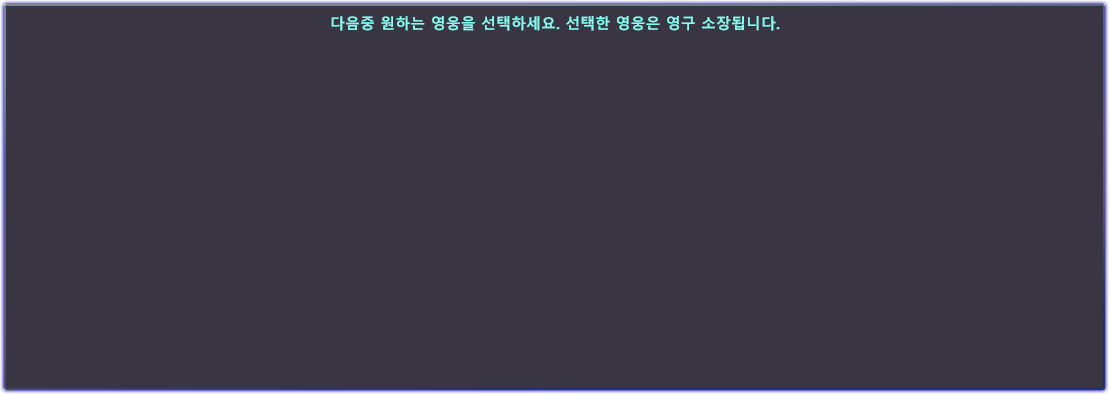
<style>
.page{position:relative;width:1110px;height:396px;background:#393542}
.page>*{position:absolute;margin:0}
.t1{font:15px "MalgunGothicBold";color:#84fcf2}
</style>
<div class="page">
<p class="t1" style="left:331px;top:16px;width:449px;height:15px">다음중 원하는 영웅을 선택하세요. 선택한 영웅은 영구 소장됩니다.</p>
</div>
